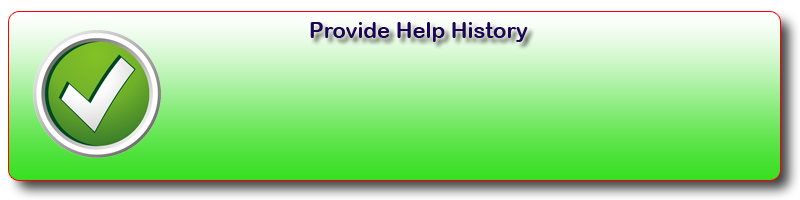
<style>
.page{position:relative;width:800px;height:200px}
.page>*{position:absolute;margin:0}
.t1{font:22px "ArialRoundedMTBold";color:#190659}
</style>
<div class="page">
<p class="t1" style="left:310px;top:22px;width:218px;height:20px">Provide Help History</p>
</div>
